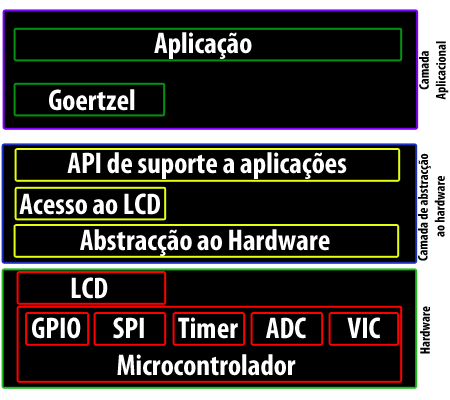
<style>
.page{position:relative;width:450px;height:400px;background:#000000}
.page>*{position:absolute;margin:0}
.t1{font:30px "MyriadPro-BoldCond";color:#ffffff}
.t2{font:14px "MyriadPro-BoldCond";color:#000000}
</style>
<div class="page">
<p class="t1" style="left:154px;top:32px;width:98px;height:27px">Aplicação</p>
<p class="t2" style="left:419px;top:41px;width:30px;height:59px;text-align:center;rotate:-90deg">Camada<br>Aplicacional</p>
<p class="t1" style="left:49px;top:89px;width:86px;height:22px">Goertzel</p>
<p class="t1" style="left:67px;top:152px;width:280px;height:27px">API de suporte a aplicações</p>
<p class="t2" style="left:418px;top:153px;width:27px;height:108px;text-align:center;rotate:-90deg">Camada de abstracção <br>ao hardware</p>
<p class="t1" style="left:19px;top:193px;width:141px;height:22px">Acesso ao LCD</p>
<p class="t1" style="left:80px;top:229px;width:250px;height:27px">Abstracção ao Hardware</p>
<p class="t1" style="left:71px;top:277px;width:37px;height:22px">LCD</p>
<p class="t1" style="left:32px;top:317px;width:49px;height:22px">GPIO</p>
<p class="t1" style="left:113px;top:317px;width:31px;height:22px">SPI</p>
<p class="t1" style="left:178px;top:317px;width:60px;height:22px">Timer</p>
<p class="t1" style="left:266px;top:317px;width:40px;height:22px">ADC</p>
<p class="t1" style="left:347px;top:317px;width:34px;height:22px">VIC</p>
<p class="t2" style="left:420px;top:306px;width:10px;height:48px;rotate:-90deg">Hardware</p>
<p class="t1" style="left:117px;top:354px;width:179px;height:22px">Microcontrolador</p>
</div>
